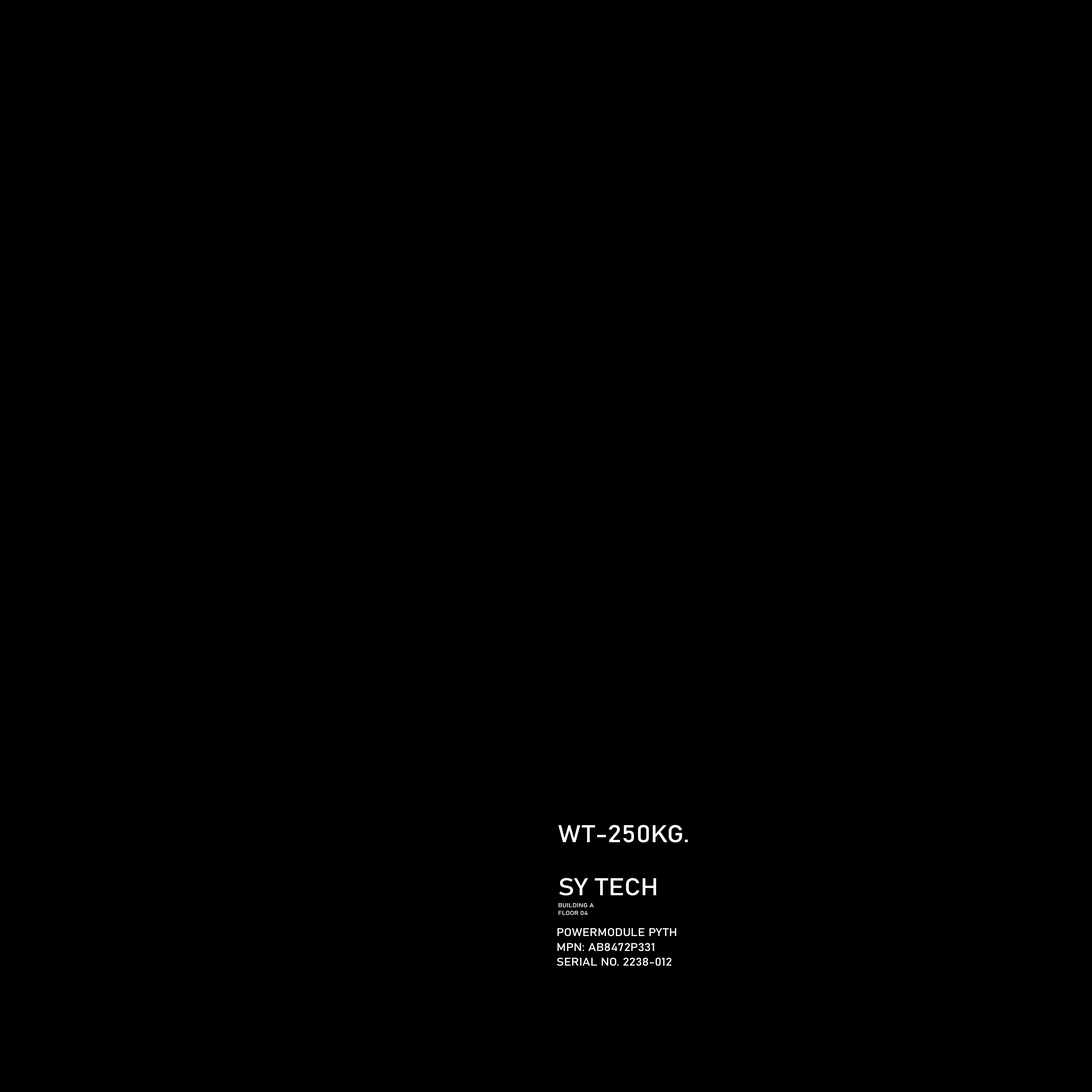
<style>
.page{position:relative;width:1092px;height:1092px;background:#000000}
.page>*{position:absolute;margin:0}
.t1{font:24px "Bahnschrift";color:#ffffff;scale:1.11 1}
.t2{font:5.8px "Bahnschrift";color:#ffffff;scale:1.17 1}
.t3{font:11px "Bahnschrift";color:#ffffff;scale:1.11 1}
</style>
<div class="page">
<p class="t1" style="left:558px;top:825px;width:130px;height:17px">WT-250KG.</p>
<p class="t1" style="left:559px;top:878px;width:97px;height:18px">SY TECH</p>
<p class="t2" style="left:559px;top:903px;width:35px;height:12px">BUILDING A<br>FLOOR 04</p>
<p class="t3" style="left:557px;top:928px;width:119px;height:38px">POWERMODULE PYTH <br>MPN: AB8472P331<br>SERIAL NO. 2238-012</p>
</div>
